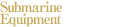
<style>
.page{position:relative;width:133px;height:27px;background:#ffffff}
.page>*{position:absolute;margin:0}
.t1{font:14px/12px "RyuminPro-ExBold";letter-spacing:-0.08em;color:#c4a956}
</style>
<div class="page">
<p class="t1" style="left:0px;top:1px;width:62px;height:26px">Submarine<br>Equipment</p>
</div>
